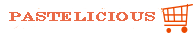
<style>
.page{position:relative;width:193px;height:37px;background:#ffffff}
.page>*{position:absolute;margin:0}
.t1{font:14px "EngraversMT";color:#ea6b48;font-weight:bold}
</style>
<div class="page">
<p class="t1" style="left:9px;top:12px;width:146px;height:9px">PAstelicious</p>
</div>
